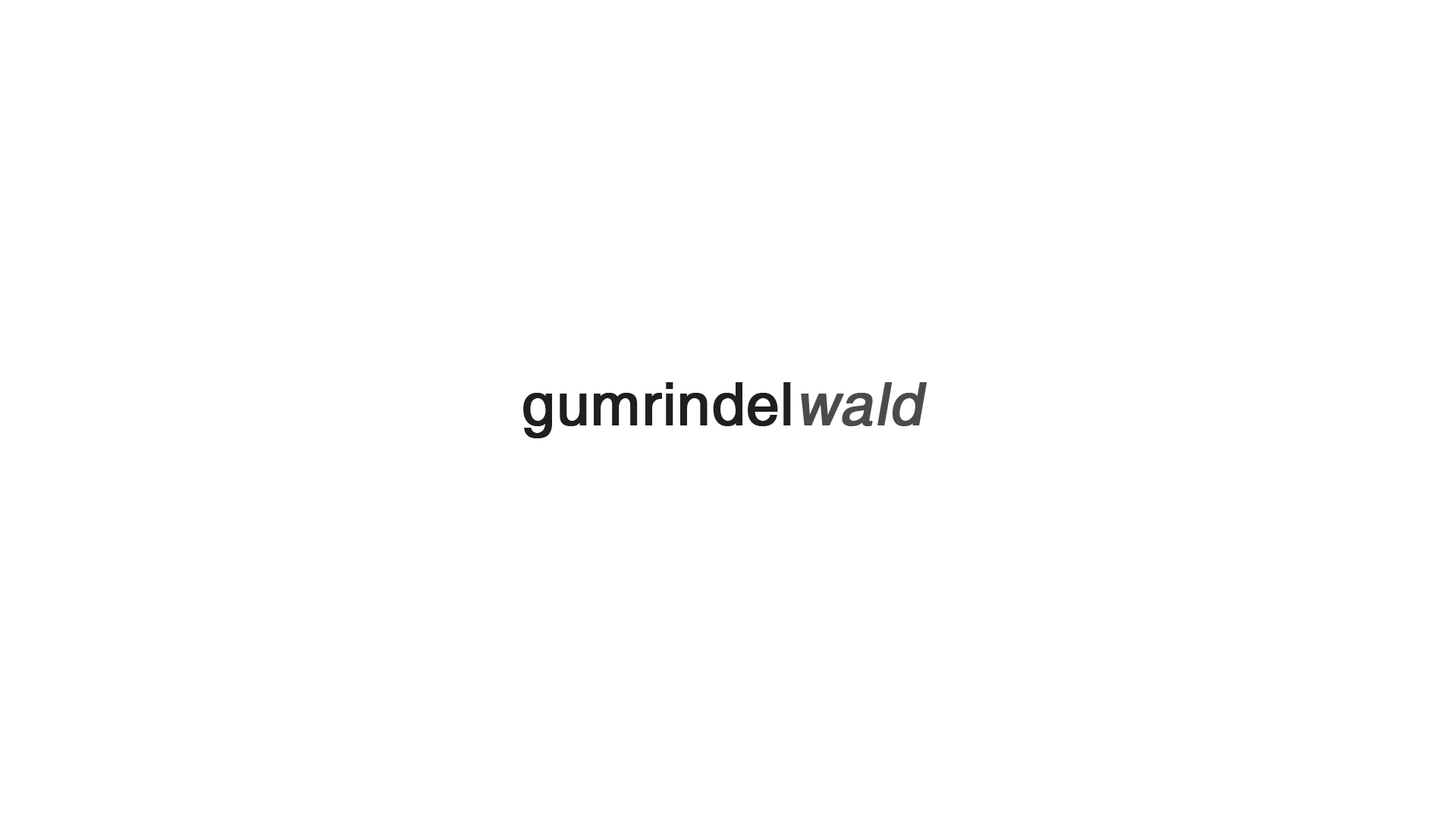
<style>
.page{position:relative;width:1456px;height:819px;background:#ffffff}
.page>*{position:absolute;margin:0}
.t1{font:58.9px "Helvetica";color:#1f1f1f;font-weight:bold}
.t2{font:58.9px "Helvetica";color:#4b4b4b;font-weight:bold;font-style:italic}
</style>
<div class="page">
<p class="t1" style="left:523px;top:382px;width:404px;height:56px">gumrindel<span class="t2">wald</span></p>
</div>
